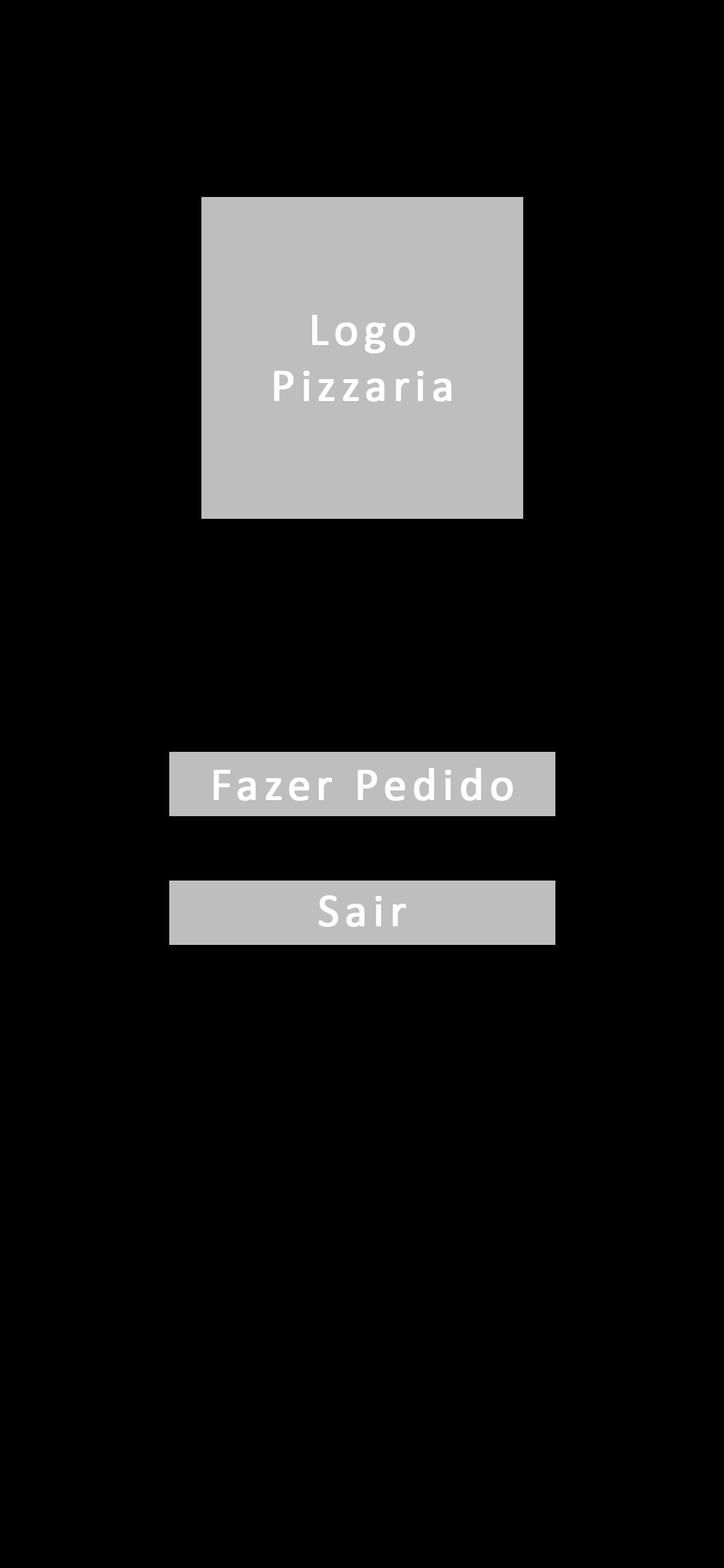
<style>
.page{position:relative;width:724px;height:1568px;background:#000000}
.page>*{position:absolute;margin:0}
.t1{font:46.3px "Calibri";letter-spacing:0.1em;color:#ffffff;font-weight:bold}
</style>
<div class="page">
<p class="t1" style="left:274px;top:315px;width:178px;height:87px;text-align:center">Logo<br>Pizzaria</p>
<p class="t1" style="left:214px;top:768px;width:299px;height:33px">Fazer Pedido</p>
<p class="t1" style="left:319px;top:895px;width:87px;height:32px">Sair</p>
</div>
